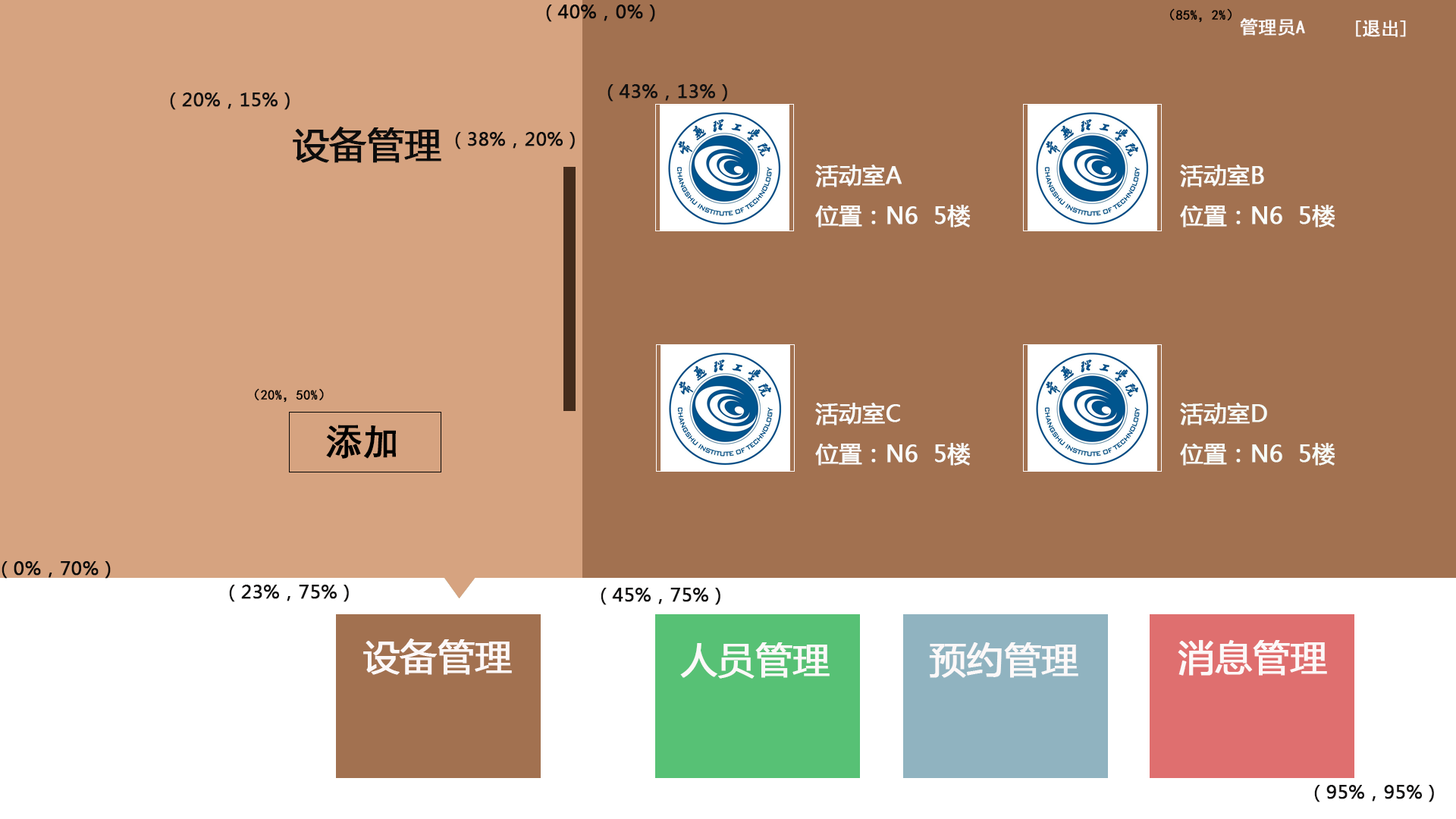
<style>
.page{position:relative;width:1456px;height:819px;background:#a27150}
.page>*{position:absolute;margin:0}
.t1{font:18.2px "MicrosoftYaHei";color:#0b0b0b;font-weight:bold}
.t2{font:13.6px "SimHei";color:#000000;font-weight:bold}
.t3{font:18.2px "SimHei";color:#fcfafa;font-weight:bold}
.t4{font:18.2px "MicrosoftYaHei";color:#121111;font-weight:bold}
.t5{font:36.4px "MicrosoftYaHei";color:#0d0d0d;font-weight:bold}
.t6{font:18.2px "MicrosoftYaHei";color:#0e0e0e;font-weight:bold}
.t7{font:22.7px "MicrosoftYaHei";color:#f9fbfa;font-weight:bold}
.t8{font:22.7px "MicrosoftYaHei";color:#f9fcfa;font-weight:bold}
.t9{font:22.7px "MicrosoftYaHei";color:#f6fbf7;font-weight:bold}
.t10{font:36.4px "SimHei";color:#000000;font-weight:bold}
.t11{font:36.4px "MicrosoftYaHei";color:#fcf8f8;font-weight:bold}
</style>
<div class="page">
<p class="t1" style="left:546px;top:5px;width:109px;height:17px">（40%，0%）</p>
<p class="t2" style="left:1169px;top:8px;width:63px;height:15px">（85%，2%）</p>
<p class="t3" style="left:1240px;top:18px;width:65px;height:18px">管理员A</p>
<p class="t3" style="left:1356px;top:20px;width:50px;height:17px">[退出]</p>
<p class="t4" style="left:607px;top:84px;width:120px;height:18px">（43%，13%）</p>
<p class="t4" style="left:170px;top:93px;width:120px;height:17px">（20%，15%）</p>
<p class="t5" style="left:293px;top:127px;width:148px;height:36px">设备管理</p>
<p class="t6" style="left:455px;top:132px;width:120px;height:17px">（38%，20%）</p>
<p class="t7" style="left:815px;top:165px;width:156px;height:62px">活动室A<br>位置：N6  5楼</p>
<p class="t8" style="left:1180px;top:165px;width:155px;height:62px">活动室B<br>位置：N6  5楼</p>
<p class="t2" style="left:254px;top:388px;width:70px;height:15px">（20%，50%）</p>
<p class="t7" style="left:815px;top:403px;width:156px;height:63px">活动室C<br>位置：N6  5楼</p>
<p class="t9" style="left:1180px;top:403px;width:155px;height:63px">活动室D<br>位置：N6  5楼</p>
<p class="t10" style="left:326px;top:425px;width:70px;height:34px">添加</p>
<p class="t1" style="left:2px;top:561px;width:109px;height:18px">（0%，70%）</p>
<p class="t4" style="left:229px;top:585px;width:120px;height:17px">（23%，75%）</p>
<p class="t4" style="left:601px;top:588px;width:119px;height:17px">（45%，75%）</p>
<p class="t11" style="left:363px;top:639px;width:149px;height:36px">设备管理</p>
<p class="t11" style="left:1178px;top:640px;width:149px;height:36px">消息管理</p>
<p class="t11" style="left:680px;top:642px;width:150px;height:37px">人员管理</p>
<p class="t11" style="left:929px;top:642px;width:149px;height:36px">预约管理</p>
<p class="t4" style="left:1314px;top:785px;width:120px;height:17px">（95%，95%）</p>
</div>
